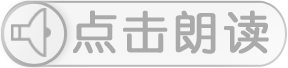
<style>
.page{position:relative;width:288px;height:68px;background:#f5f5f5}
.page>*{position:absolute;margin:0}
.t1{font:45px "FZY3JW--GB1-0";letter-spacing:0.1em;color:#aaaaaa;font-weight:bold}
</style>
<div class="page">
<p class="t1" style="left:73px;top:10px;width:196px;height:44px">点击朗读</p>
</div>
